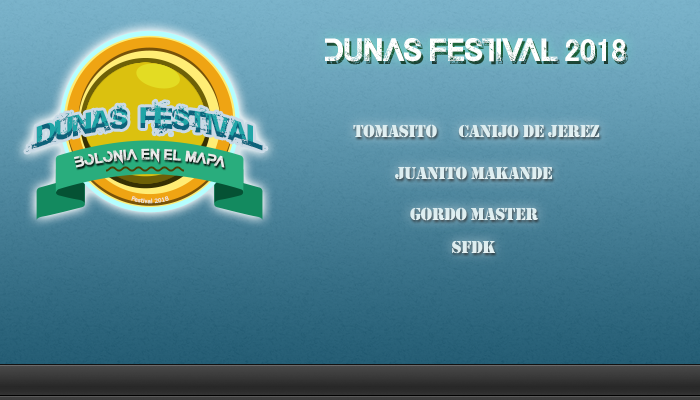
<style>
.page{position:relative;width:700px;height:400px}
.page>*{position:absolute;margin:0}
.t1{font:30px "TheLastCall";letter-spacing:-0.02em;color:#ffffff}
.t2{font:18px "Stencil";letter-spacing:-0.02em;color:#deeef1}
</style>
<div class="page">
<p class="t1" style="left:325px;top:38px;width:301px;height:24px">DUNAS FESTIVAL 2018</p>
<p class="t2" style="left:353px;top:124px;width:84px;height:14px">Tomasito</p>
<p class="t2" style="left:458px;top:124px;width:142px;height:14px">Canijo de Jerez</p>
<p class="t2" style="left:395px;top:166px;width:157px;height:14px">Juanito Makande</p>
<p class="t2" style="left:410px;top:207px;width:128px;height:14px">Gordo Master</p>
<p class="t2" style="left:452px;top:241px;width:43px;height:12px">SFDK</p>
</div>
